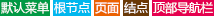
<style>
.page{position:relative;width:214px;height:16px}
.page>*{position:absolute;margin:0}
.t1{font:12px "MicrosoftYaHei";color:#ffffff}
</style>
<div class="page">
<p class="t1" style="left:1px;top:1px;width:49px;height:13px">默认菜单</p>
<p class="t1" style="left:54px;top:1px;width:36px;height:13px">根节点</p>
<p class="t1" style="left:95px;top:2px;width:24px;height:12px">页面</p>
<p class="t1" style="left:124px;top:1px;width:24px;height:13px">结点</p>
<p class="t1" style="left:153px;top:1px;width:60px;height:13px">顶部导航栏</p>
</div>
